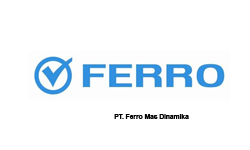
<style>
.page{position:relative;width:250px;height:150px;background:#ffffff}
.page>*{position:absolute;margin:0}
.t1{font:6.6px "Arial-BoldMT";color:#000000}
</style>
<div class="page">
<p class="t1" style="left:114px;top:114px;width:75px;height:5px">PT. Ferro Mas Dinamika</p>
</div>
